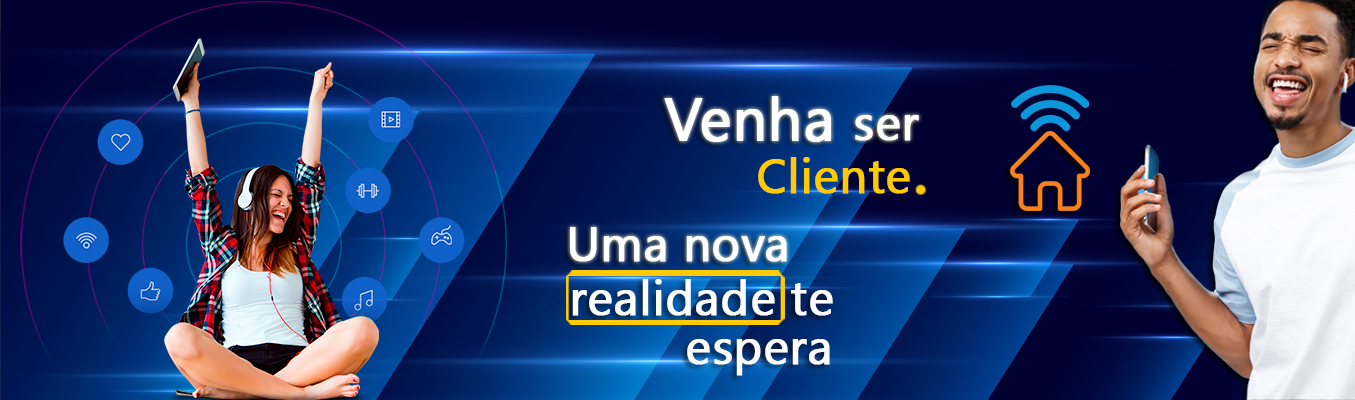
<style>
.page{position:relative;width:1355px;height:400px}
.page>*{position:absolute;margin:0}
.t1{font:60px "NirmalaUI";color:#ffffff;font-weight:bold}
.t2{font:48px "NirmalaUI";color:#ffffff;font-weight:bold}
.t3{font:48px "NirmalaUI";color:#ffca00;font-weight:bold}
</style>
<div class="page">
<p class="t1" style="left:664px;top:96px;width:255px;height:46px">Venha <span class="t2">ser</span></p>
<p class="t3" style="left:758px;top:157px;width:152px;height:37px">Cliente</p>
<p class="t2" style="left:570px;top:227px;width:217px;height:35px">Uma nova</p>
<p class="t2" style="left:572px;top:279px;width:261px;height:37px">realidade te</p>
<p class="t2" style="left:687px;top:339px;width:143px;height:37px">espera</p>
</div>
